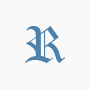
<style>
.page{position:relative;width:90px;height:90px;background:#f9f9f9}
.page>*{position:absolute;margin:0}
.t1{font:50.2px "OldEnglishTextMT";color:#4d81a9}
</style>
<div class="page">
<p class="t1" style="left:25px;top:26px;width:40px;height:37px">R</p>
</div>
